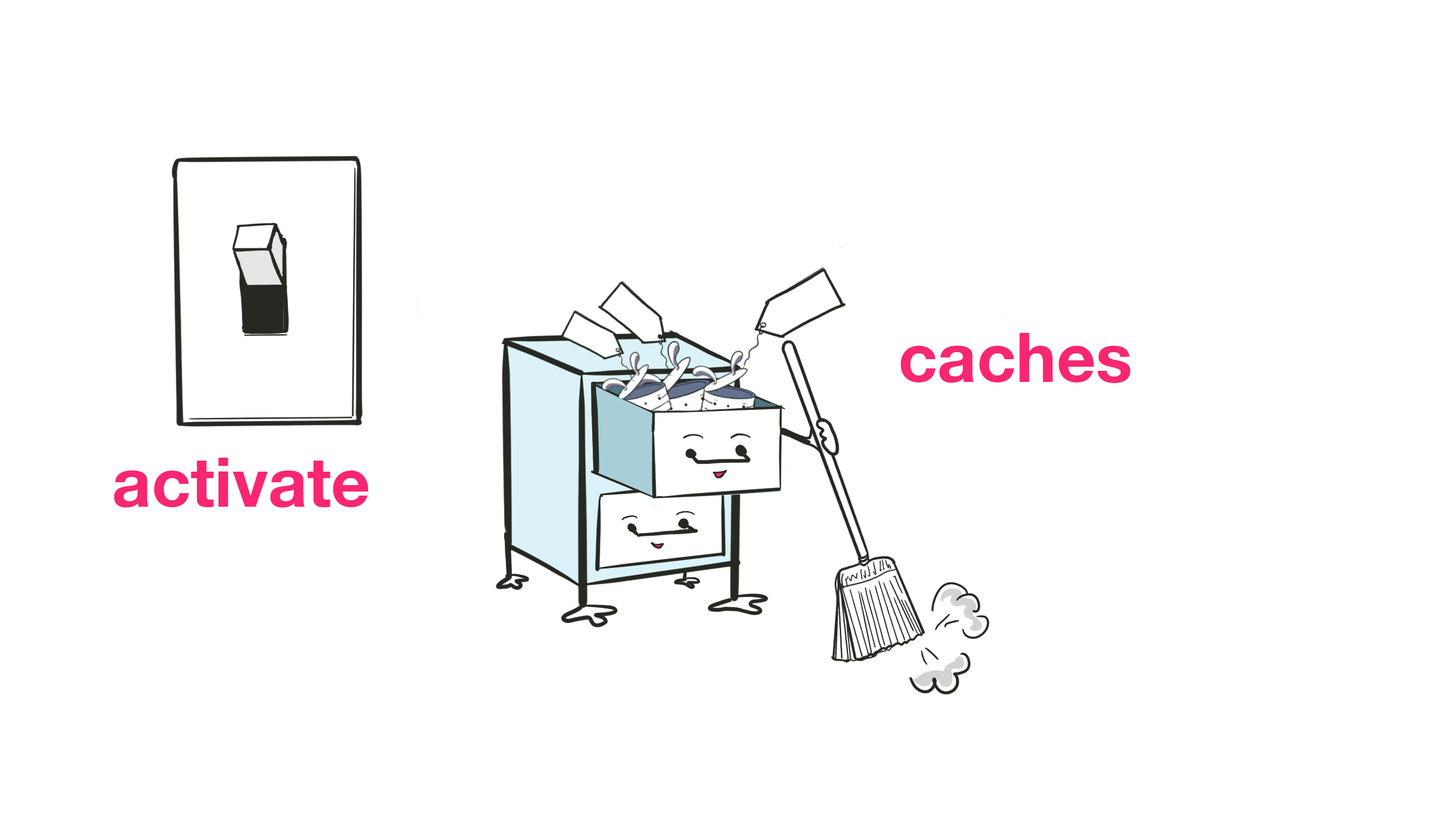
<style>
.page{position:relative;width:1446px;height:825px;background:#ffffff}
.page>*{position:absolute;margin:0}
.t1{font:68.4px "HelveticaNeue-Bold";color:#f92672}
</style>
<div class="page">
<p class="t1" style="left:900px;top:333px;width:231px;height:50px">caches</p>
<p class="t1" style="left:114px;top:458px;width:254px;height:50px">activate</p>
</div>
